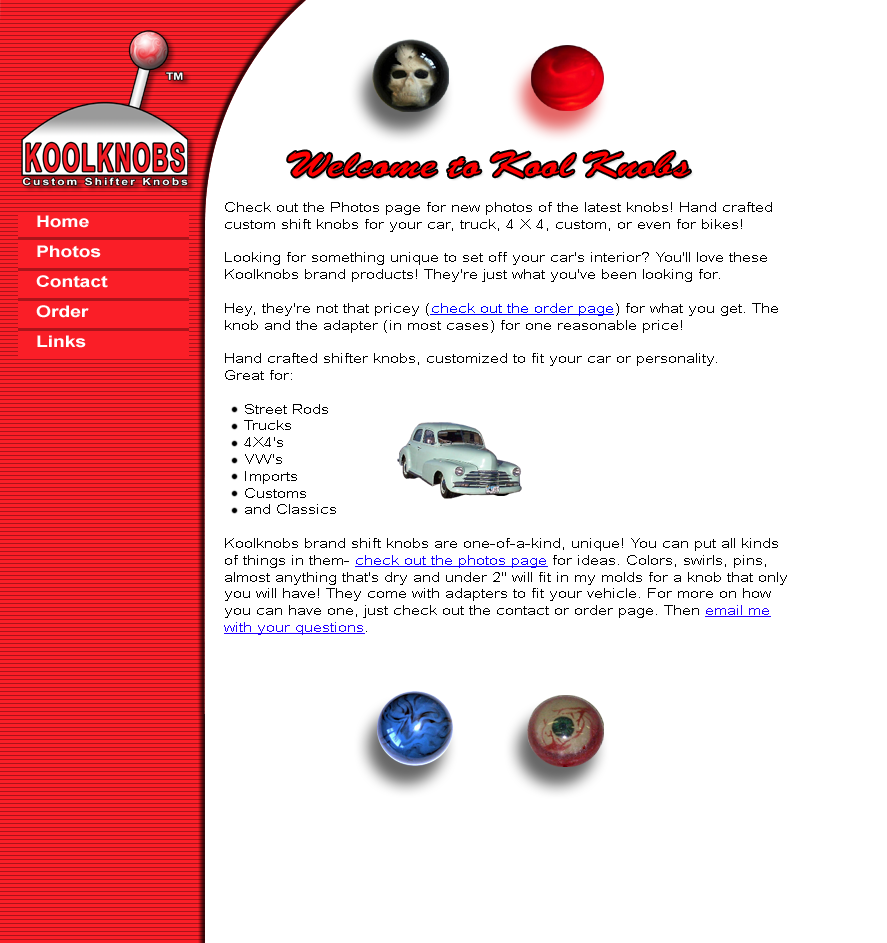
<style>
.page{position:relative;width:887px;height:943px;background:#ffffff}
.page>*{position:absolute;margin:0}
.t1{font:36px "Adolph-Script";color:#ff0000;scale:1.2 1}
.t2{font:14px "ArialMT";color:#000000;scale:1.2 1}
.t3{font:14px "ArialMT";color:#0000ff;text-decoration:underline;scale:1.2 1}
.t4{font:14px "ArialMT";color:#1200ff;text-decoration:underline;scale:1.2 1}
.t5{font:14px "ArialMT";color:#2400ff;text-decoration:underline;scale:1.2 1}
.t6{font:16px/30px "Arial-BoldMT";color:#ffffff;scale:1.2 1}
</style>
<div class="page">
<p class="t1" style="left:288px;top:151px;width:402px;height:27px">Welcome to Kool Knobs</p>
<p class="t2" style="left:224px;top:202px;width:563px;height:433px">Check out the Photos page for new photos of the latest knobs! Hand crafted<br>custom shift knobs for your car, truck, 4 X 4, custom, or even for bikes!<br><br>Looking for something unique to set off your car's interior? You'll love these<br>Koolknobs brand products! They're just what you've been looking for. <br><br>Hey, they're not that pricey (<span class="t3">check out the order page</span>) for what you get. The<br>knob and the adapter (in most cases) for one reasonable price!<br><br>Hand crafted shifter knobs, customized to fit your car or personality.<br>Great for:<br><br>    Street Rods <br>    Trucks <br>    4X4's <br>    VW's <br>    Imports <br>    Customs <br>    and Classics <br><br>Koolknobs brand shift knobs are one-of-a-kind, unique! You can put all kinds<br>of things in them- <span class="t4">check out the photos page</span> for ideas. Colors, swirls, pins,<br>almost anything that's dry and under 2" will fit in my molds for a knob that only<br>you will have! They come with adapters to fit your vehicle. For more on how<br>you can have one, just check out the contact or order page. Then <span class="t5">email me<br>with your questions</span>.</p>
<p class="t6" style="left:36px;top:215px;width:72px;height:133px">Home<br>Photos<br>Contact<br>Order<br>Links</p>
</div>
